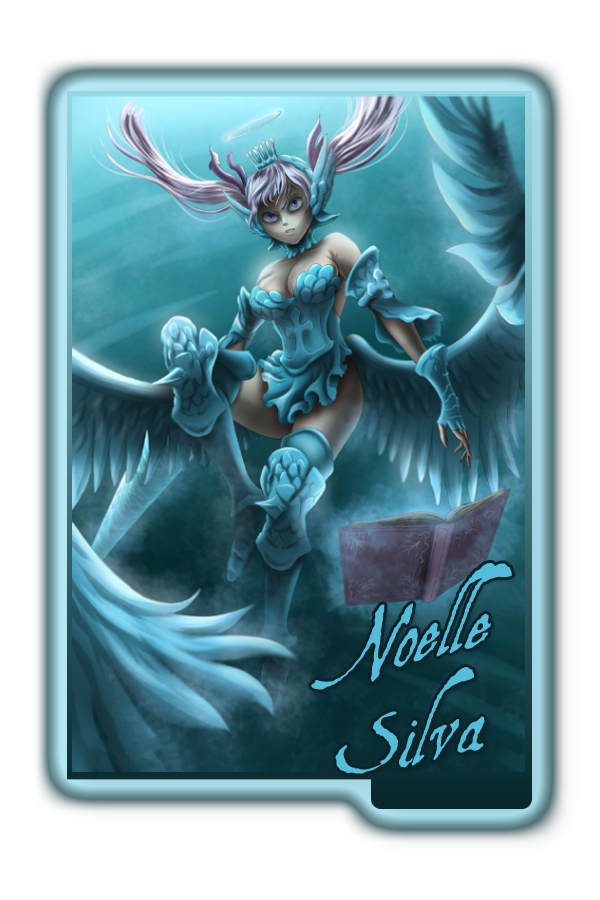
<style>
.page{position:relative;width:600px;height:900px;background:#ffffff}
.page>*{position:absolute;margin:0}
.t1{font:85px "AquilineTwo";color:#55bdd9}
</style>
<div class="page">
<p class="t1" style="left:311px;top:562px;width:201px;height:212px;text-align:center">Noelle<br>Silva</p>
</div>
